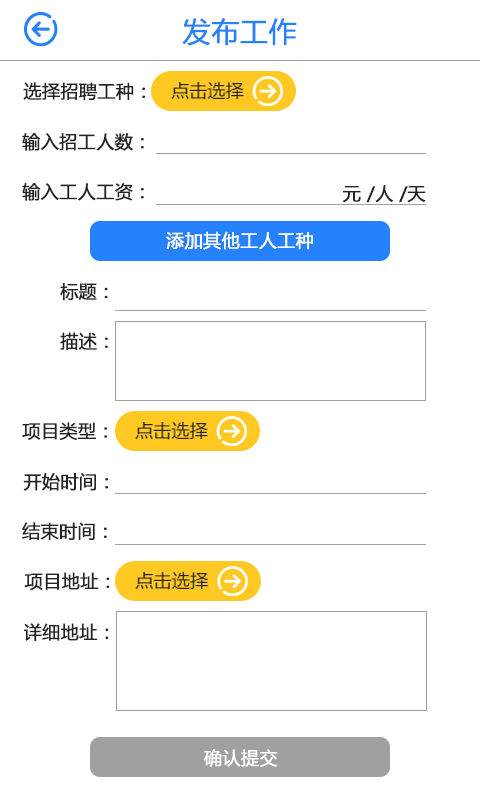
<style>
.page{position:relative;width:480px;height:800px;background:#ffffff}
.page>*{position:absolute;margin:0}
.t1{font:28px "MicrosoftYaHei";color:#2681fc;font-weight:bold}
.t2{font:18px "MicrosoftYaHei";color:#252323;font-weight:bold}
.t3{font:18px "MicrosoftYaHei";color:#ffffff;font-weight:bold}
</style>
<div class="page">
<p class="t1" style="left:182px;top:18px;width:115px;height:28px">发布工作</p>
<p class="t2" style="left:23px;top:82px;width:122px;height:19px">选择招聘工种：</p>
<p class="t2" style="left:22px;top:133px;width:122px;height:18px">输入招工人数：</p>
<p class="t2" style="left:22px;top:183px;width:122px;height:18px">输入工人工资：</p>
<p class="t2" style="left:342px;top:185px;width:84px;height:18px">元 /人 /天</p>
<p class="t3" style="left:166px;top:231px;width:147px;height:19px">添加其他工人工种</p>
<p class="t2" style="left:60px;top:283px;width:48px;height:18px">标题：</p>
<p class="t2" style="left:60px;top:332px;width:48px;height:18px">描述：</p>
<p class="t2" style="left:22px;top:422px;width:85px;height:18px">项目类型：</p>
<p class="t2" style="left:23px;top:473px;width:85px;height:18px">开始时间：</p>
<p class="t2" style="left:22px;top:522px;width:85px;height:18px">结束时间：</p>
<p class="t2" style="left:24px;top:572px;width:86px;height:19px">项目地址：</p>
<p class="t2" style="left:24px;top:623px;width:85px;height:18px">详细地址：</p>
<p class="t3" style="left:203px;top:749px;width:75px;height:18px">确认提交</p>
</div>
